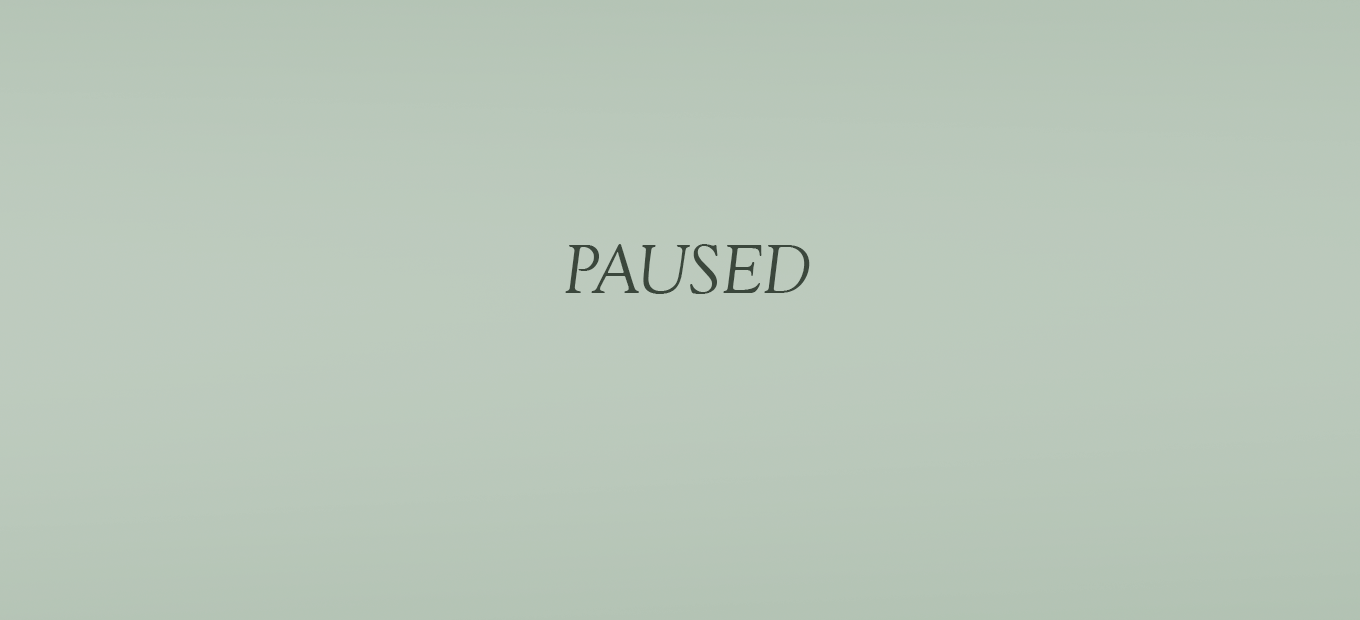
<style>
.page{position:relative;width:1360px;height:620px}
.page>*{position:absolute;margin:0}
.t1{font:72px "GoudyOldStyleT-Italic";color:#3b473c}
.t2{font:72px "MyriadPro-Regular";color:#3b473c}
</style>
<div class="page">
<p class="t1" style="left:565px;top:244px;width:245px;height:50px">PAUSED<br><span class="t2"><br><br><br>PAUSED</span></p>
</div>
